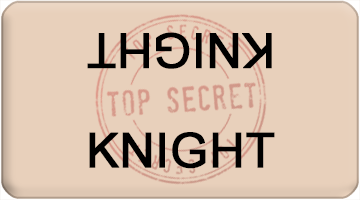
<style>
.page{position:relative;width:360px;height:200px;background:#e8d0bb}
.page>*{position:absolute;margin:0}
.t1{font:48px "ArialMT";color:#000000;font-weight:bold}
</style>
<div class="page">
<p class="t1" style="left:87px;top:32px;width:185px;height:37px;rotate:180deg">KNIGHT</p>
<p class="t1" style="left:89px;top:132px;width:186px;height:37px">KNIGHT</p>
</div>
